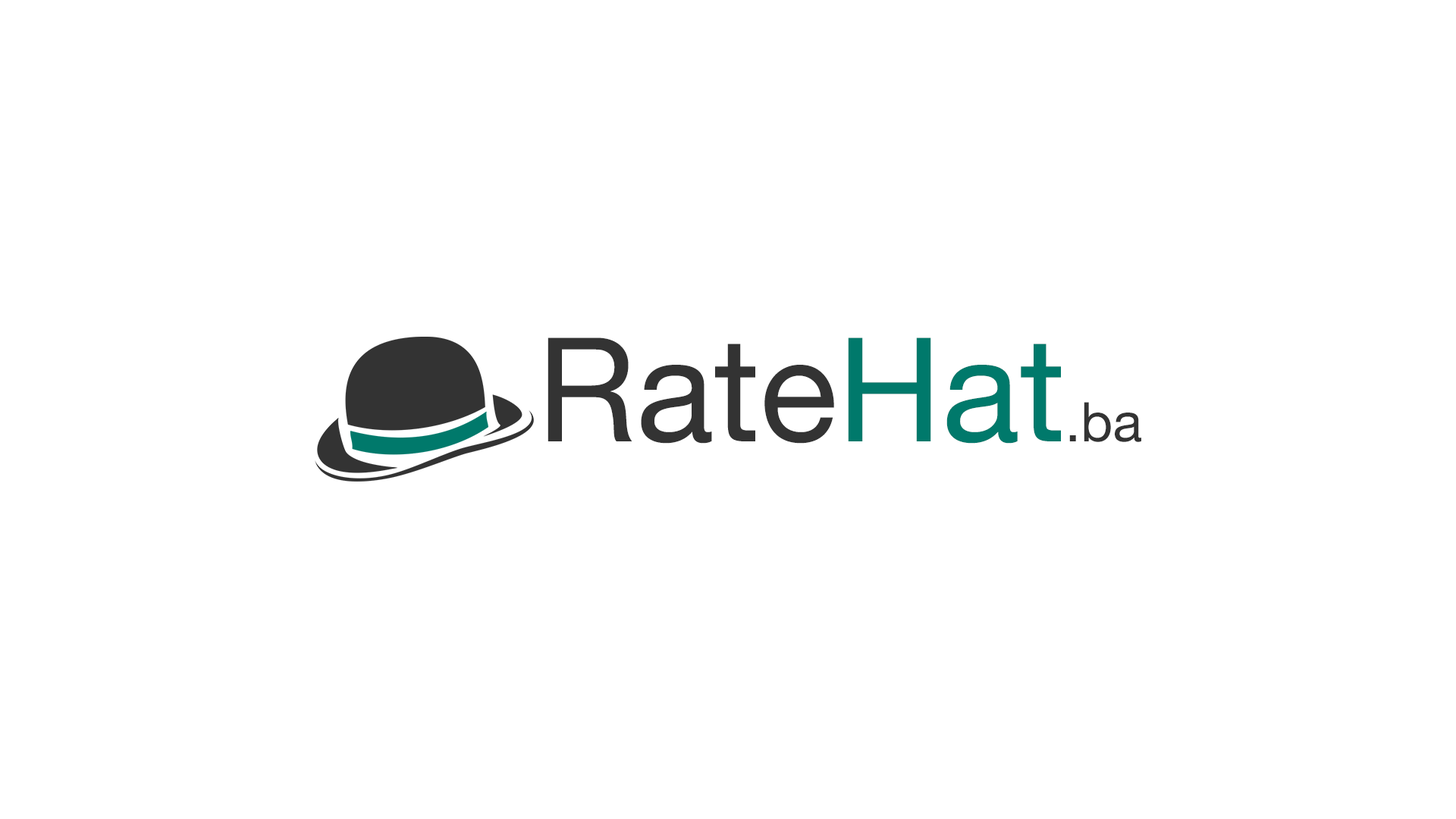
<style>
.page{position:relative;width:1456px;height:819px;background:#ffffff}
.page>*{position:absolute;margin:0}
.t1{font:144.8px "HelveticaNeueLTStd-Roman";color:#333333}
.t2{font:144.8px "HelveticaNeueLTStd-Roman";color:#00796b}
.t3{font:54.6px "HelveticaNeueLTStd-Roman";color:#333333}
</style>
<div class="page">
<p class="t1" style="left:548px;top:337px;width:593px;height:107px">Rate<span class="t2">Hat</span><span class="t3">.ba</span></p>
</div>
